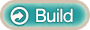
<style>
.page{position:relative;width:90px;height:30px}
.page>*{position:absolute;margin:0}
.t1{font:18px "FutoGoB101Pr5-Bold";letter-spacing:-0.04em;color:#ffffff}
</style>
<div class="page">
<p class="t1" style="left:36px;top:8px;width:37px;height:15px">Build</p>
</div>
